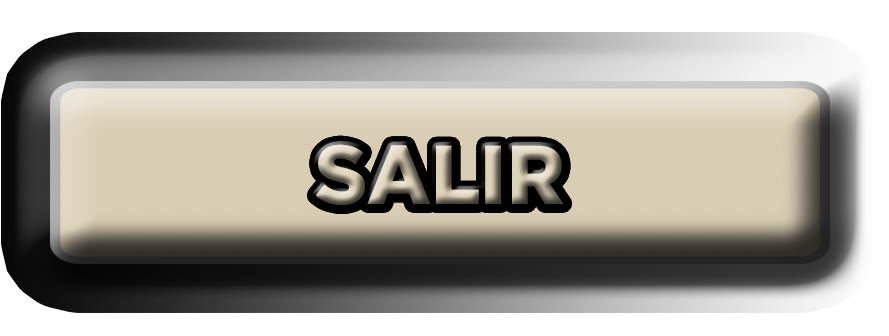
<style>
.page{position:relative;width:889px;height:336px}
.page>*{position:absolute;margin:0}
.t1{font:83.3px "GothamBlack";scale:0.96 1}
</style>
<div class="page">
<p class="t1" style="left:315px;top:144px;width:249px;height:61px">SALIR</p>
<p class="t1" style="left:315px;top:144px;width:249px;height:61px">SALIR</p>
</div>
